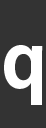
<style>
.page{position:relative;width:46px;height:128px;background:#333333}
.page>*{position:absolute;margin:0}
.t1{font:75px "AdobeGothicStd-Bold";color:#ffffff}
</style>
<div class="page">
<p class="t1" style="left:4px;top:45px;width:39px;height:60px">q</p>
</div>
